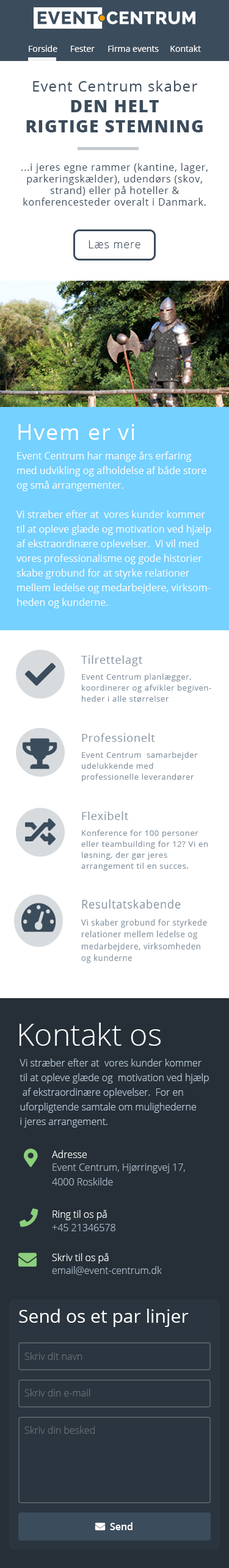
<style>
.page{position:relative;width:229px;height:1568px;background:#ffffff}
.page>*{position:absolute;margin:0}
.t1{font:8.5px "OpenSans-Regular";color:#ffffff}
.t2{font:9.8px "OpenSans-Regular";letter-spacing:0.05em;color:#3b4c5c}
.t3{font:14.6px "OpenSans-Regular";letter-spacing:0.05em;color:#3b4c5c}
.t4{font:17.1px "OpenSans-ExtraBold";letter-spacing:0.05em;color:#3b4c5c;text-transform:uppercase}
.t5{font:11px "OpenSans-Light";letter-spacing:0.05em;color:#3b4c5c}
.t6{font:9.8px/14.6px "OpenSans-Regular";color:#fefefe}
.t7{font:22px "OpenSans-Regular";letter-spacing:0.05em;color:#fefefe}
.t8{font:7.9px/11px "OpenSans-Regular";letter-spacing:0.05em;color:#8392a0}
.t9{font:11px/11px "OpenSans-Regular";letter-spacing:0.05em;color:#8392a0}
.t10{font:8.5px/11.8px "OpenSans-Regular";letter-spacing:0.05em;color:#8392a0;scale:0.93 1}
.t11{font:11.8px/11.8px "OpenSans-Regular";letter-spacing:0.05em;color:#8392a0;scale:0.93 1}
.t12{font:30.5px "OpenSans-Light";color:#ffffff}
.t13{font:9.8px/14.6px "OpenSans-Light";color:#b8c9d8}
.t14{font:9.8px "OpenSans-Light";color:#ffffff}
.t15{font:9.8px/14.6px "OpenSans-Light";color:#a9b9c8}
.t16{font:9.8px "OpenSans-Light";color:#a9b9c8}
.t17{font:18.3px "OpenSans-Regular";color:#ffffff}
.t18{font:9.8px "OpenSans-Light";color:#696f74}
.t19{font:9.8px "OpenSans-SemiBold";color:#ffffff}
</style>
<div class="page">
<p class="t1" style="left:29px;top:45px;width:28px;height:7px">Forside</p>
<p class="t1" style="left:71px;top:46px;width:24px;height:6px">Fester</p>
<p class="t1" style="left:108px;top:45px;width:51px;height:7px">Firma events</p>
<p class="t1" style="left:170px;top:45px;width:31px;height:7px">Kontakt</p>
<p class="t2" style="left:21px;top:81px;width:186px;height:125px;text-align:center"><span class="t3">Event Centrum skaber<br></span><span class="t4">DEN HELT <br>RIGTIGE STEMNING<br><br><br></span>...i jeres egne rammer (kantine, lager, parkeringskælder), udendørs (skov, strand) eller på hoteller &amp; konferencesteder overalt i Danmark.</p>
<p class="t5" style="left:88px;top:240px;width:52px;height:8px">Læs mere</p>
<p class="t6" style="left:16px;top:424px;width:195px;height:184px"><span class="t7">Hvem er vi<br><br></span>Event Centrum har mange års erfaring med udvikling og afholdelse af både store og små arrangementer. <br><br>Vi stræber efter at  vores kunder kommer til at opleve glæde og motivation ved hjælp af ekstraordinære oplevelser.  Vi vil med vores professionalisme og gode historier skabe grobund for at styrke relationer mellem ledelse og medarbejdere, virksomheden og kunderne.</p>
<p class="t8" style="left:81px;top:655px;width:130px;height:47px"><span class="t9">Tilrettelagt<br></span>Event Centrum planlægger, koordinerer og afvikler begivenheder i alle størrelser</p>
<p class="t8" style="left:81px;top:733px;width:117px;height:49px"><span class="t9">Professionelt<br></span>Event Centrum  samarbejder udelukkende med professionelle leverandører</p>
<p class="t8" style="left:81px;top:811px;width:127px;height:60px"><span class="t9">Flexibelt<br></span>Konference for 100 personer eller teambuilding for 12? Vi en løsning, der gør jeres arrangement til en succes.</p>
<p class="t10" style="left:81px;top:899px;width:126px;height:64px"><span class="t11">Resultatskabende<br></span>Vi skaber grobund for styrkede relationer mellem ledelse og medarbejdere, virksomheden og kunderne</p>
<p class="t12" style="left:20px;top:1023px;width:140px;height:23px">Kontakt os</p>
<p class="t13" style="left:20px;top:1059px;width:189px;height:68px">Vi stræber efter at  vores kunder kommer <br>til at opleve glæde og  motivation ved hjælp<br> af ekstraordinære oplevelser.  For en <br>uforpligtende samtale om mulighederne <br>i jeres arrangement.</p>
<p class="t14" style="left:52px;top:1150px;width:35px;height:8px">Adresse</p>
<p class="t15" style="left:52px;top:1163px;width:133px;height:22px">Event Centrum, Hjørringvej 17, <br>4000 Roskilde</p>
<p class="t14" style="left:52px;top:1210px;width:55px;height:10px">Ring til os på</p>
<p class="t16" style="left:52px;top:1224px;width:63px;height:7px">+45 21346578</p>
<p class="t14" style="left:52px;top:1253px;width:57px;height:11px">Skriv til os på</p>
<p class="t16" style="left:52px;top:1266px;width:110px;height:9px">email@event-centrum.dk</p>
<p class="t17" style="left:19px;top:1309px;width:170px;height:18px">Send os et par linjer</p>
<p class="t18" style="left:24px;top:1352px;width:58px;height:8px">Skriv dit navn</p>
<p class="t18" style="left:24px;top:1389px;width:66px;height:8px">Skriv din e-mail</p>
<p class="t18" style="left:24px;top:1426px;width:71px;height:8px">Skriv din besked</p>
<p class="t19" style="left:110px;top:1522px;width:22px;height:8px">Send</p>
</div>
